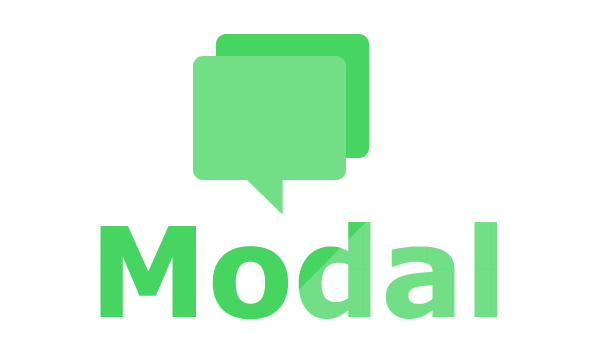
<style>
.page{position:relative;width:600px;height:351px;background:#ffffff}
.page>*{position:absolute;margin:0}
.t1{font:125px "Motken-noqta-ii"}
</style>
<div class="page">
<p class="t1" style="left:100px;top:222px;width:397px;height:98px">Modal</p>
</div>
